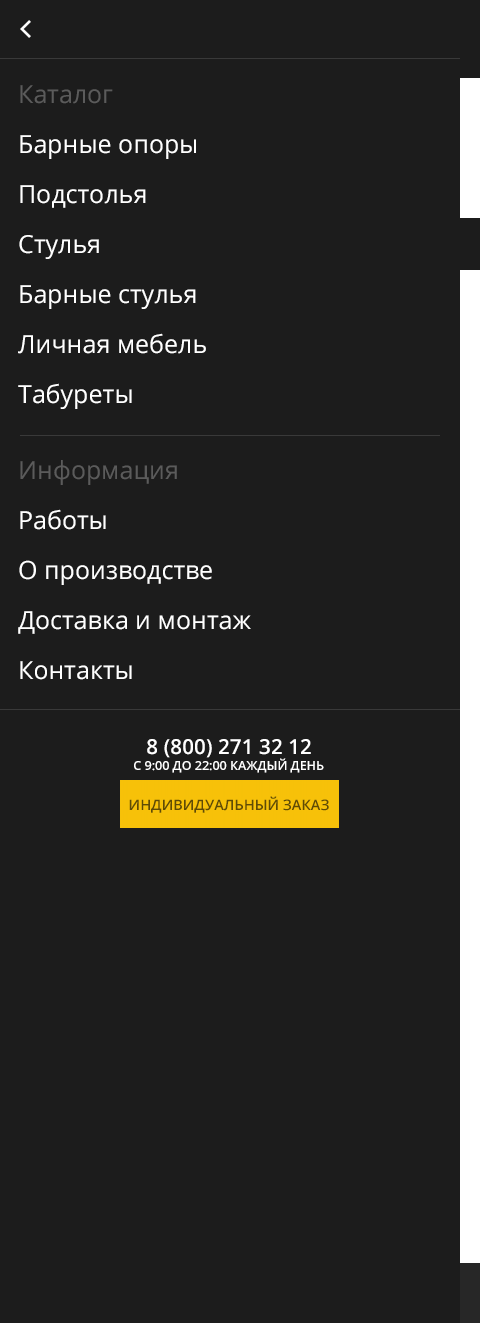
<style>
.page{position:relative;width:480px;height:1323px;background:#1c1c1c}
.page>*{position:absolute;margin:0}
.t1{font:25px/50px "OpenSans-Regular";color:#ffffff}
.t2{font:25px/50px "OpenSans-Regular";color:#5b5b5b}
.t3{font:20.8px "OpenSans-SemiBold";color:#ffffff;text-transform:uppercase}
.t4{font:12.5px "OpenSans-SemiBold";color:#ffffff;text-transform:uppercase}
.t5{font:14.6px "OpenSans-SemiBold";color:#5f4b06;text-transform:uppercase}
</style>
<div class="page">
<p class="t1" style="left:18px;top:85px;width:188px;height:324px"><span class="t2">Каталог<br></span>Барные опоры<br>Подстолья<br>Стулья<br>Барные стулья<br>Личная мебель<br>Табуреты</p>
<p class="t1" style="left:18px;top:460px;width:233px;height:220px"><span class="t2">Информация<br></span>Работы<br>О производстве<br>Доставка и монтаж<br>Контакты</p>
<p class="t3" style="left:147px;top:739px;width:164px;height:19px">8 (800) 271 32 12</p>
<p class="t4" style="left:134px;top:758px;width:190px;height:15px">С 9:00 до 22:00 каждый день</p>
<p class="t5" style="left:129px;top:796px;width:200px;height:17px">индивидуальный заказ</p>
</div>
